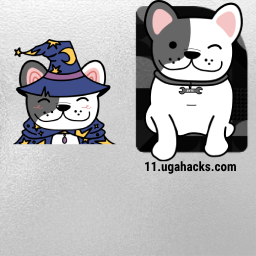
<style>
.page{position:relative;width:256px;height:256px}
.page>*{position:absolute;margin:0}
.t1{font:13px "RobotoCondensed-Bold";color:#000000}
</style>
<div class="page">
<p class="t1" style="left:145px;top:161px;width:91px;height:13px">11.ugahacks.com</p>
</div>
